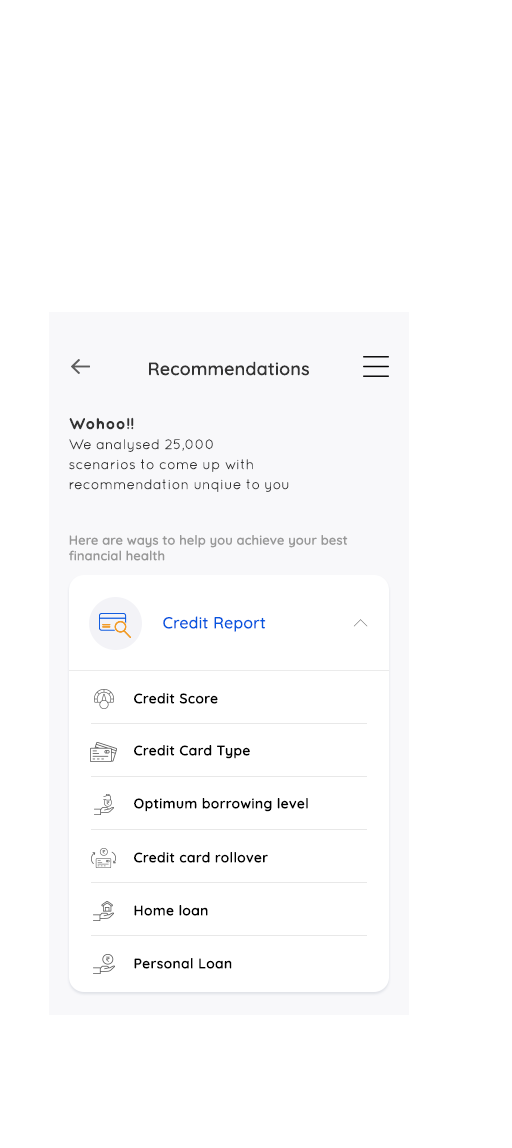
<style>
.page{position:relative;width:512px;height:1148px;background:#ffffff}
.page>*{position:absolute;margin:0}
.t1{font:18px "Quicksand-Medium";letter-spacing:0.01em;color:#333333}
.t2{font:14px/20px "Quicksand-Regular";letter-spacing:0.01em;color:#333333}
.t3{font:16px/20px "Quicksand-Bold";letter-spacing:0.01em;color:#333333}
.t4{font:13px "Quicksand-Medium";letter-spacing:0.01em;color:#989898}
.t5{font:16px "Quicksand-Medium";letter-spacing:0.015em;color:#0455df}
.t6{font:14px "Quicksand-Medium";letter-spacing:0.025em;color:#000000}
</style>
<div class="page">
<p class="t1" style="left:149px;top:361px;width:160px;height:15px">Recommendations</p>
<p class="t2" style="left:69px;top:417px;width:220px;height:75px"><span class="t3">Wohoo!!<br></span>We analysed 25,000 <br>scenarios to come up with <br>recommendation unqiue to you</p>
<p class="t4" style="left:69px;top:535px;width:279px;height:26px">Here are ways to help you achieve your best <br>financial health</p>
<p class="t5" style="left:163px;top:616px;width:103px;height:16px">Credit Report</p>
<p class="t6" style="left:134px;top:693px;width:84px;height:11px">Credit Score</p>
<p class="t6" style="left:134px;top:745px;width:116px;height:14px">Credit Card Type</p>
<p class="t6" style="left:134px;top:798px;width:174px;height:14px">Optimum borrowing level</p>
<p class="t6" style="left:134px;top:852px;width:134px;height:11px">Credit card rollover</p>
<p class="t6" style="left:134px;top:905px;width:74px;height:11px">Home loan</p>
<p class="t6" style="left:134px;top:958px;width:98px;height:11px">Personal Loan</p>
</div>
